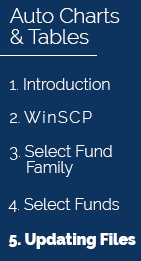
<style>
.page{position:relative;width:141px;height:261px;background:#0d345e}
.page>*{position:absolute;margin:0}
.t1{font:20.6px/21.9px "Raleway-Light";color:#fefeff}
.t2{font:16px "Raleway-Light";color:#fefeff}
.t3{font:16px "Raleway-Light";letter-spacing:0.1em;color:#fefeff}
.t4{font:16px/16px "Raleway-Light";color:#fefeff}
.t5{font:16px "Raleway-Black";color:#fefeff;scale:0.97 1}
</style>
<div class="page">
<p class="t1" style="left:9px;top:8px;width:111px;height:36px">Auto Charts<br>&amp; Tables</p>
<p class="t2" style="left:10px;top:78px;width:100px;height:12px">1. Introduction</p>
<p class="t3" style="left:10px;top:111px;width:82px;height:12px"><span class="t2">2. </span>WinSCP</p>
<p class="t4" style="left:10px;top:145px;width:102px;height:32px">3. Select Fund<br>    Family</p>
<p class="t2" style="left:8px;top:198px;width:111px;height:14px">4. Select Funds</p>
<p class="t5" style="left:8px;top:233px;width:128px;height:16px">5. Updating Files</p>
</div>
